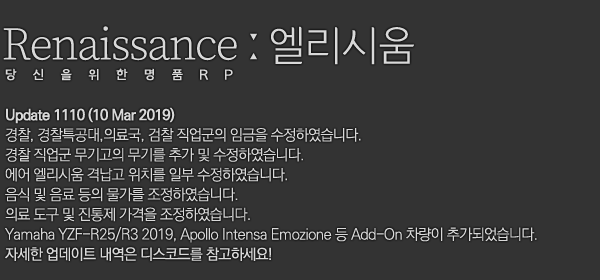
<style>
.page{position:relative;width:600px;height:280px;background:#333333}
.page>*{position:absolute;margin:0}
.t1{font:46px "SourceSerifRoman-Light";letter-spacing:-0.036em;color:#d9d9d9}
.t2{font:55px "YiSunShinDotumL";letter-spacing:-0.045em;color:#d9d9d9}
.t3{font:46px "YiSunShinDotumL";letter-spacing:-0.045em;color:#d9d9d9}
.t4{font:13.8px "YiSunShinDotumM";letter-spacing:0.46em;color:#d9d9d9}
.t5{font:15px/19.9px "KoPubDotumLight";letter-spacing:-0.045em;color:#d9d9d9}
.t6{font:15px/19.9px "KoPubDotumBold";letter-spacing:-0.045em;color:#d9d9d9}
.t7{font:15px/19.9px "KoPubDotumMedium";letter-spacing:-0.045em;color:#d9d9d9}
</style>
<div class="page">
<p class="t1" style="left:3px;top:26px;width:411px;height:39px">Renaissance<span class="t2">ː</span><span class="t3">엘리시움</span></p>
<p class="t4" style="left:5px;top:68px;width:228px;height:13px">당 신 을 위 한 명 품 R P</p>
<p class="t5" style="left:5px;top:107px;width:532px;height:154px"><span class="t6">Update 1110 (10 Mar 2019)<br></span>경찰, 경찰특공대,의료국, 검찰 직업군의 임금을 수정하였습니다.<br>경찰 직업군 무기고의 무기를 추가 및 수정하였습니다.<br>에어 엘리시움 격납고 위치를 일부 수정하였습니다.<br>음식 및 음료 등의 물가를 조정하였습니다.<br>의료 도구 및 진통제 가격을 조정하였습니다.<br>Yamaha YZF-R25/R3 2019, Apollo Intensa Emozione 등 Add-On 차량이 추가되었습니다.<br><span class="t7">자세한 업데이트 내역은 디스코드를 참고하세요!</span></p>
</div>
